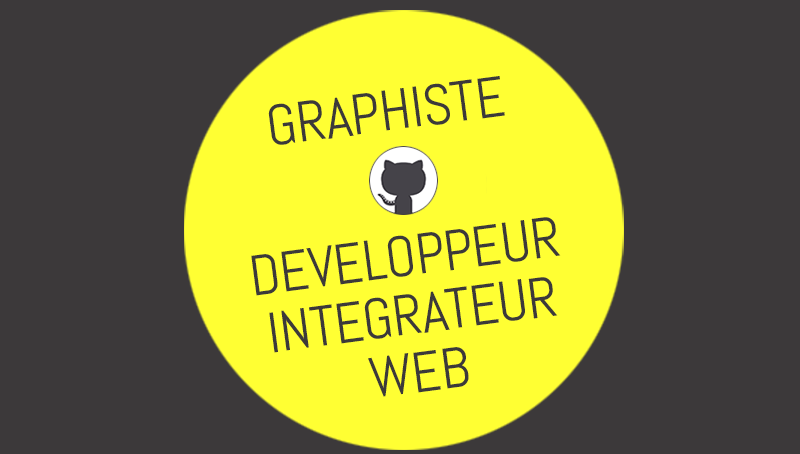
<style>
.page{position:relative;width:800px;height:454px;background:#3c393a}
.page>*{position:absolute;margin:0}
.t1{font:57px "Abel-Regular";letter-spacing:-0.01em;color:#3c393a;font-variant:small-caps}
.t2{font:57px/58.5px "Abel-Regular";letter-spacing:-0.01em;color:#3c393a;font-variant:small-caps}
</style>
<div class="page">
<p class="t1" style="left:251px;top:76px;width:310px;height:321px;text-align:center;rotate:-7deg">GRAPHISTE<br><br>DEVELOPPEUR<br><span class="t2">INTEGRATEUR<br>WEB</span></p>
</div>
